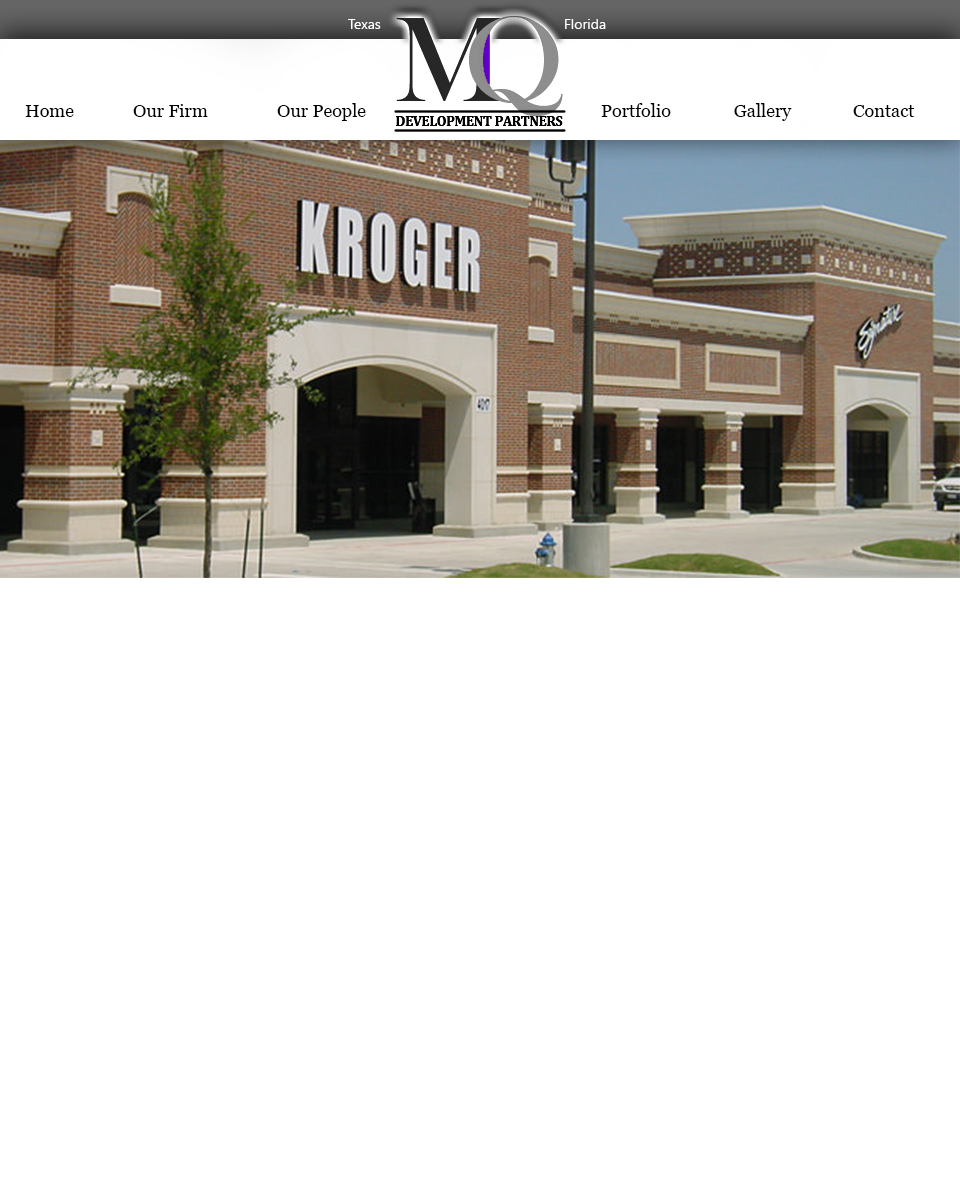
<style>
.page{position:relative;width:960px;height:1200px;background:#ffffff}
.page>*{position:absolute;margin:0}
.t1{font:14px "Gadugi";color:#ffffff}
.t2{font:18px "Vani";color:#000000}
</style>
<div class="page">
<p class="t1" style="left:348px;top:19px;width:258px;height:10px">Texas      Florida</p>
<p class="t2" style="left:25px;top:103px;width:890px;height:18px">Home  Our Firm  Our People       Portfolio               Gallery    Contact</p>
</div>
